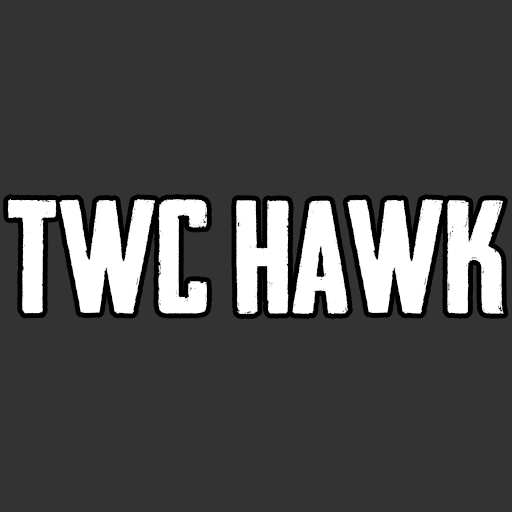
<style>
.page{position:relative;width:512px;height:512px;background:#333333}
.page>*{position:absolute;margin:0}
.t1{font:153px "HeadlinerNo.45";color:#ffffff;scale:1.11 1}
</style>
<div class="page">
<p class="t1" style="left:7px;top:199px;width:497px;height:115px">twc hawk</p>
</div>
